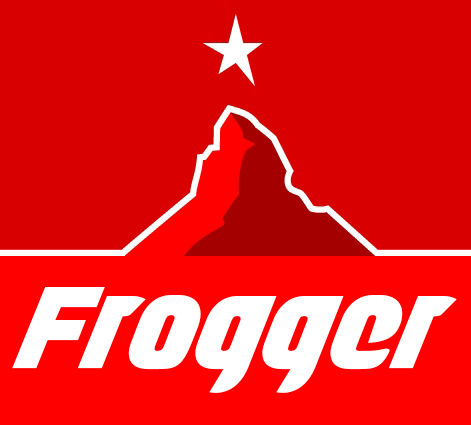
<style>
.page{position:relative;width:471px;height:425px;background:#d80001}
.page>*{position:absolute;margin:0}
.t1{font:110px "Longhaul";color:#ffffff}
</style>
<div class="page">
<p class="t1" style="left:12px;top:287px;width:445px;height:106px">Frogger</p>
</div>
